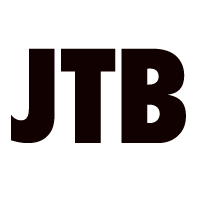
<style>
.page{position:relative;width:200px;height:200px;background:#ffffff}
.page>*{position:absolute;margin:0}
.t1{font:125px "Futura-CondensedExtraBold";color:#110101}
</style>
<div class="page">
<p class="t1" style="left:11px;top:48px;width:175px;height:95px">JTB</p>
</div>
